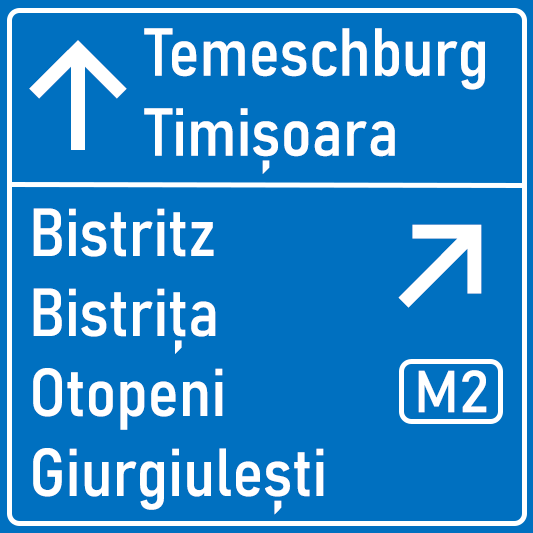
<style>
.page{position:relative;width:533px;height:533px;background:#0070c0}
.page>*{position:absolute;margin:0}
.t1{font:66.7px "Bahnschrift-SemiCondensed";color:#ffffff}
.t2{font:150px "Inter-Medium";color:#ffffff}
.t3{font:58.3px "Bahnschrift";color:#ffffff}
</style>
<div class="page">
<p class="t1" style="left:144px;top:28px;width:341px;height:146px">Temeschburg<br>Timișoara</p>
<p class="t2" style="left:29px;top:40px;width:98px;height:110px">↑</p>
<p class="t1" style="left:33px;top:208px;width:291px;height:307px">Bistritz<br>Bistrița<br>Otopeni<br>Giurgiulești</p>
<p class="t2" style="left:398px;top:224px;width:84px;height:84px">↗</p>
<p class="t3" style="left:418px;top:370px;width:69px;height:43px">M2</p>
</div>
